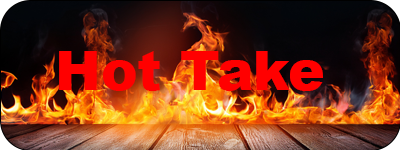
<style>
.page{position:relative;width:400px;height:150px}
.page>*{position:absolute;margin:0}
.t1{font:54.7px "Arial-Black";color:#ff0000}
</style>
<div class="page">
<p class="t1" style="left:59px;top:51px;width:264px;height:40px">Hot Take</p>
</div>
